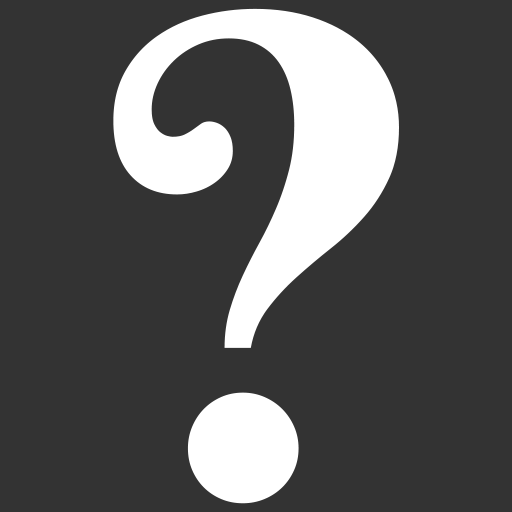
<style>
.page{position:relative;width:512px;height:512px;background:#333333}
.page>*{position:absolute;margin:0}
.t1{font:670px "BerkshireSwash-Regular";color:#ffffff}
</style>
<div class="page">
<p class="t1" style="left:113px;top:8px;width:286px;height:496px">?</p>
</div>
